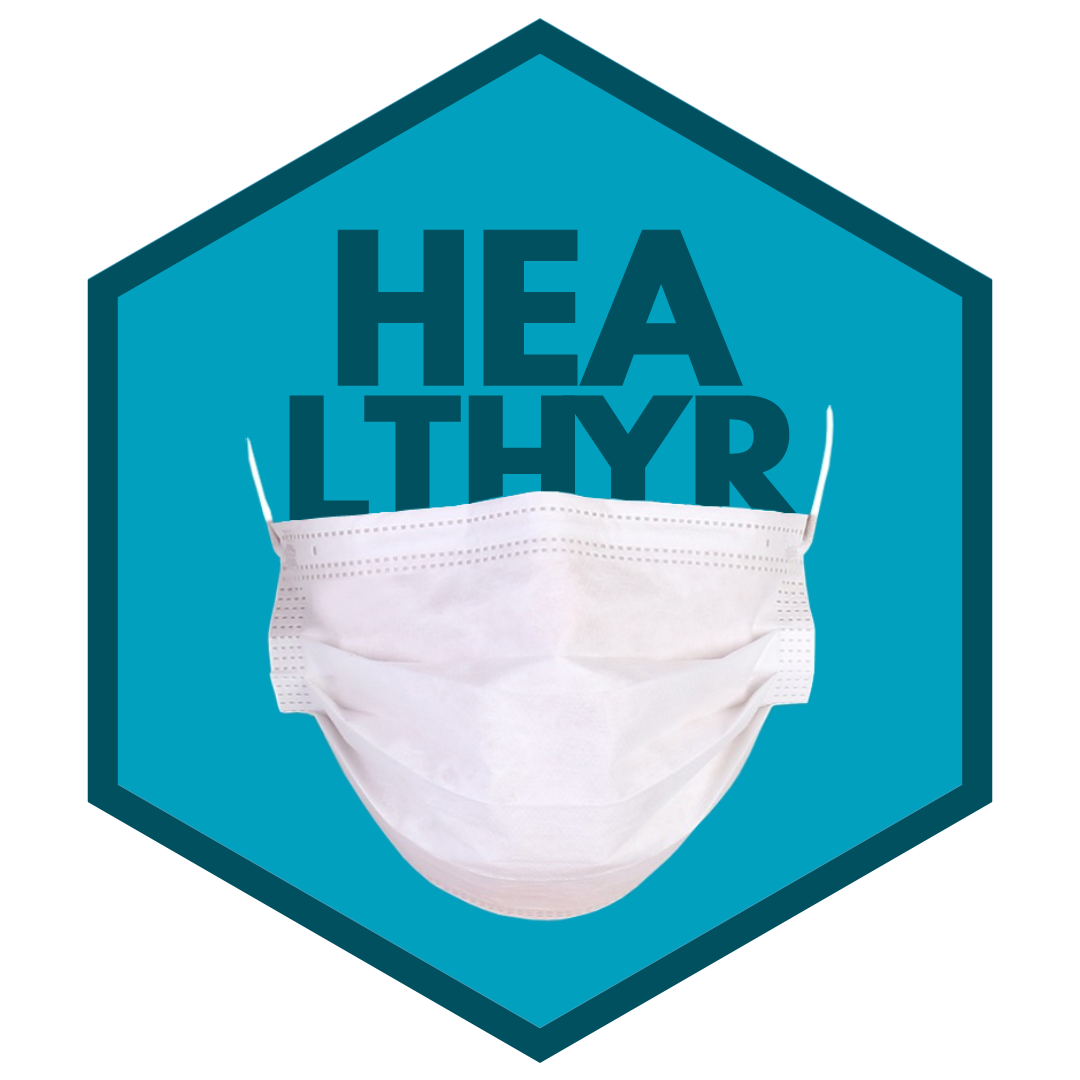
<style>
.page{position:relative;width:1080px;height:1080px;background:#ffffff}
.page>*{position:absolute;margin:0}
.t1{font:189px "LeagueSpartan-Bold";color:#01505f;font-weight:bold}
.t2{font:159px "LeagueSpartan-Bold";color:#01505f;font-weight:bold}
</style>
<div class="page">
<p class="t1" style="left:337px;top:229px;width:406px;height:157px">HEA</p>
<p class="t2" style="left:289px;top:395px;width:519px;height:132px">LTHYR</p>
</div>
